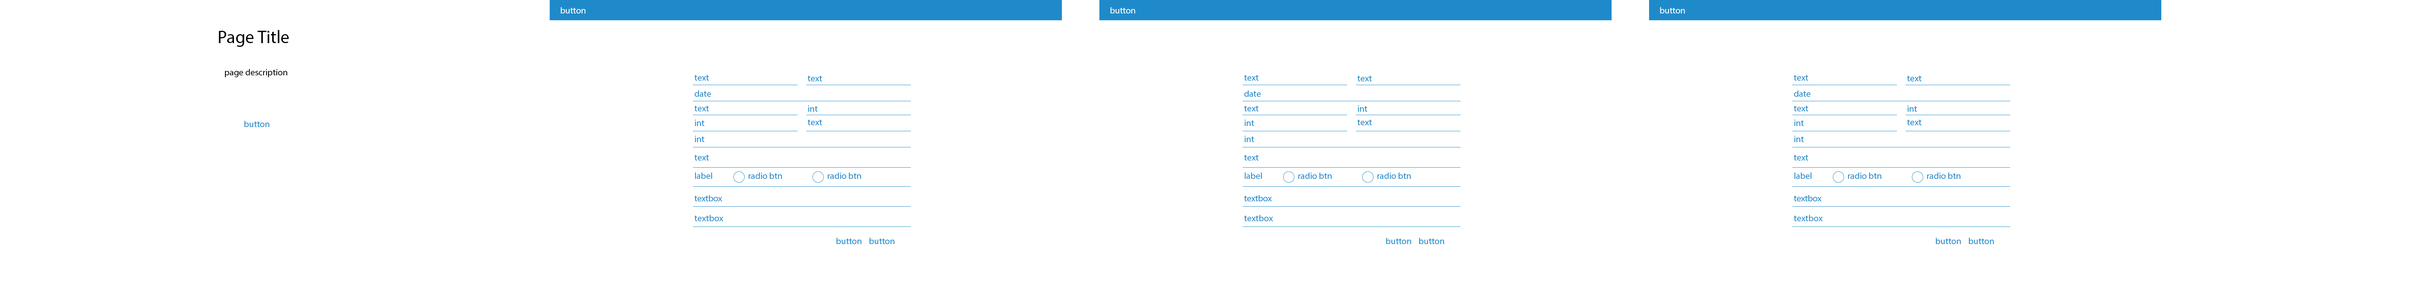
<style>
.page{position:relative;width:2432px;height:288px;background:#ffffff}
.page>*{position:absolute;margin:0}
.t1{font:9px "MyriadPro-Regular";color:#ffffff}
.t2{font:18px "MyriadPro-Regular";color:#000000}
.t3{font:9px "MyriadPro-Regular";color:#000000}
.t4{font:9px "MyriadPro-Regular";color:#1f8aca}
.t5{font:9px "MyriadPro-Regular";letter-spacing:-0.02em;color:#1f8aca}
</style>
<div class="page">
<p class="t1" style="left:561px;top:7px;width:25px;height:7px">button</p>
<p class="t1" style="left:1110px;top:7px;width:26px;height:7px">button</p>
<p class="t1" style="left:1660px;top:7px;width:25px;height:7px">button</p>
<p class="t2" style="left:219px;top:30px;width:70px;height:17px">Page Title</p>
<p class="t3" style="left:225px;top:69px;width:62px;height:8px">page description</p>
<p class="t4" style="left:694px;top:75px;width:15px;height:6px">text</p>
<p class="t4" style="left:808px;top:75px;width:14px;height:6px">text</p>
<p class="t4" style="left:1244px;top:75px;width:15px;height:6px">text</p>
<p class="t4" style="left:1358px;top:75px;width:14px;height:6px">text</p>
<p class="t4" style="left:1794px;top:75px;width:15px;height:6px">text</p>
<p class="t4" style="left:1907px;top:75px;width:15px;height:6px">text</p>
<p class="t4" style="left:694px;top:90px;width:17px;height:7px">date</p>
<p class="t4" style="left:1244px;top:90px;width:17px;height:7px">date</p>
<p class="t4" style="left:1794px;top:90px;width:17px;height:7px">date</p>
<p class="t4" style="left:694px;top:105px;width:15px;height:6px">text</p>
<p class="t4" style="left:808px;top:105px;width:10px;height:7px">int</p>
<p class="t4" style="left:1244px;top:105px;width:15px;height:6px">text</p>
<p class="t4" style="left:1358px;top:105px;width:10px;height:7px">int</p>
<p class="t4" style="left:1794px;top:105px;width:15px;height:6px">text</p>
<p class="t4" style="left:1908px;top:105px;width:9px;height:7px">int</p>
<p class="t4" style="left:244px;top:121px;width:26px;height:6px">button</p>
<p class="t4" style="left:695px;top:120px;width:10px;height:6px">int</p>
<p class="t4" style="left:808px;top:119px;width:14px;height:6px">text</p>
<p class="t4" style="left:1245px;top:120px;width:9px;height:6px">int</p>
<p class="t4" style="left:1358px;top:119px;width:14px;height:6px">text</p>
<p class="t4" style="left:1794px;top:120px;width:10px;height:6px">int</p>
<p class="t4" style="left:1907px;top:119px;width:15px;height:6px">text</p>
<p class="t4" style="left:695px;top:136px;width:10px;height:6px">int</p>
<p class="t4" style="left:1245px;top:136px;width:9px;height:6px">int</p>
<p class="t4" style="left:1794px;top:136px;width:10px;height:6px">int</p>
<p class="t4" style="left:694px;top:154px;width:15px;height:6px">text</p>
<p class="t4" style="left:1244px;top:154px;width:15px;height:6px">text</p>
<p class="t4" style="left:1794px;top:154px;width:15px;height:6px">text</p>
<p class="t4" style="left:695px;top:172px;width:17px;height:7px">label</p>
<p class="t4" style="left:748px;top:172px;width:34px;height:7px">radio btn</p>
<p class="t4" style="left:828px;top:172px;width:33px;height:7px">radio btn</p>
<p class="t4" style="left:1245px;top:172px;width:17px;height:7px">label</p>
<p class="t4" style="left:1298px;top:172px;width:34px;height:7px">radio btn</p>
<p class="t4" style="left:1377px;top:172px;width:34px;height:7px">radio btn</p>
<p class="t4" style="left:1794px;top:172px;width:18px;height:7px">label</p>
<p class="t4" style="left:1848px;top:172px;width:34px;height:7px">radio btn</p>
<p class="t4" style="left:1927px;top:172px;width:34px;height:7px">radio btn</p>
<p class="t5" style="left:694px;top:195px;width:28px;height:6px">textbox</p>
<p class="t5" style="left:1244px;top:195px;width:28px;height:6px">textbox</p>
<p class="t5" style="left:1794px;top:195px;width:28px;height:6px">textbox</p>
<p class="t4" style="left:694px;top:215px;width:29px;height:6px">textbox</p>
<p class="t4" style="left:1244px;top:215px;width:29px;height:6px">textbox</p>
<p class="t4" style="left:1794px;top:215px;width:29px;height:6px">textbox</p>
<p class="t4" style="left:837px;top:238px;width:25px;height:6px">button</p>
<p class="t4" style="left:870px;top:238px;width:25px;height:6px">button</p>
<p class="t4" style="left:1386px;top:238px;width:26px;height:6px">button</p>
<p class="t4" style="left:1419px;top:238px;width:25px;height:6px">button</p>
<p class="t4" style="left:1936px;top:238px;width:25px;height:6px">button</p>
<p class="t4" style="left:1969px;top:238px;width:25px;height:6px">button</p>
</div>
